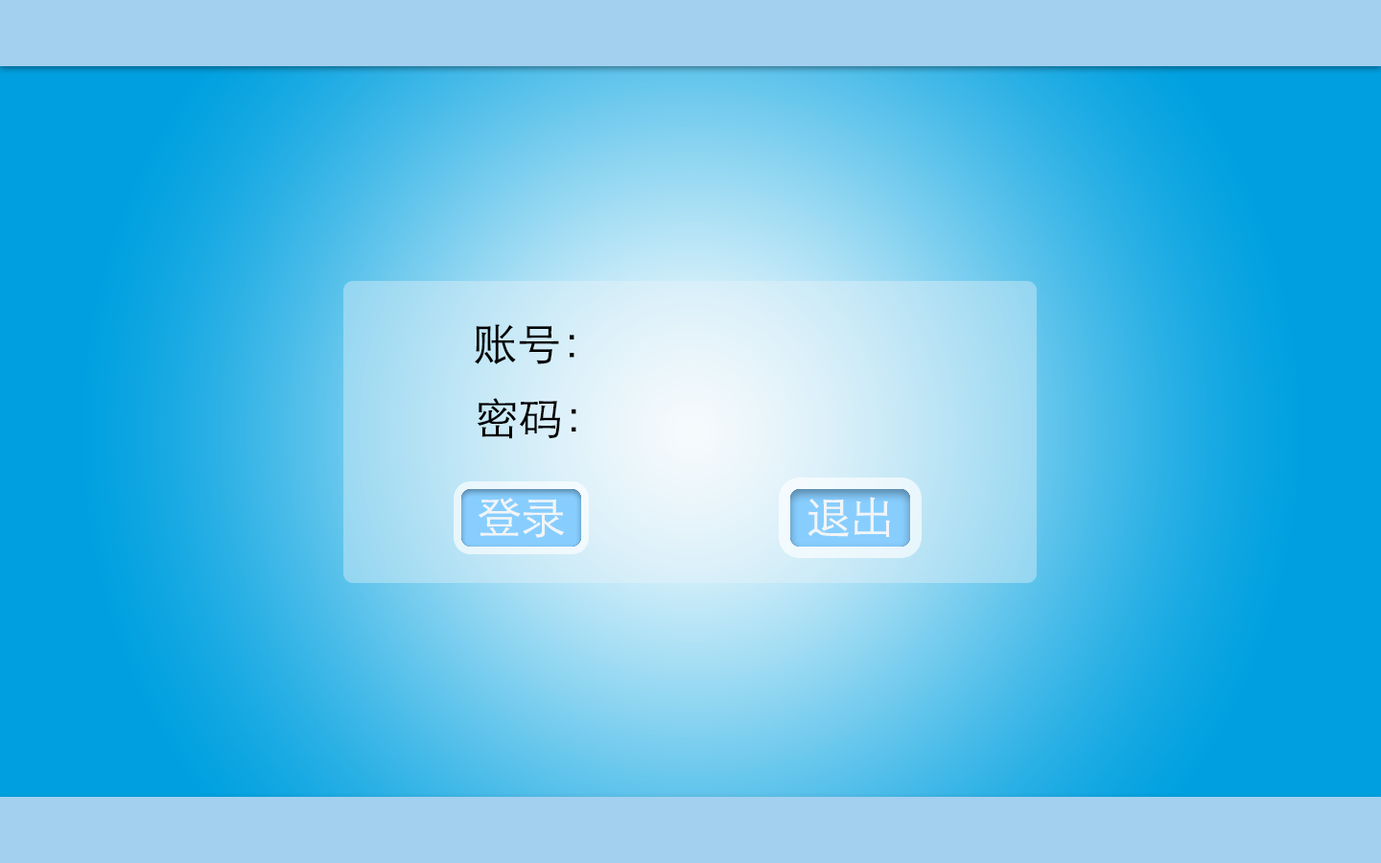
<style>
.page{position:relative;width:1381px;height:863px}
.page>*{position:absolute;margin:0}
.t1{font:44px "STXihei";color:#000000;text-transform:uppercase}
.t2{font:44px "STXihei";color:#f2f5f7;text-transform:uppercase}
</style>
<div class="page">
<p class="t1" style="left:475px;top:324px;width:100px;height:41px">账号：</p>
<p class="t1" style="left:477px;top:398px;width:99px;height:41px">密码：</p>
<p class="t2" style="left:479px;top:498px;width:85px;height:40px">登录</p>
<p class="t2" style="left:808px;top:497px;width:82px;height:40px">退出</p>
</div>
